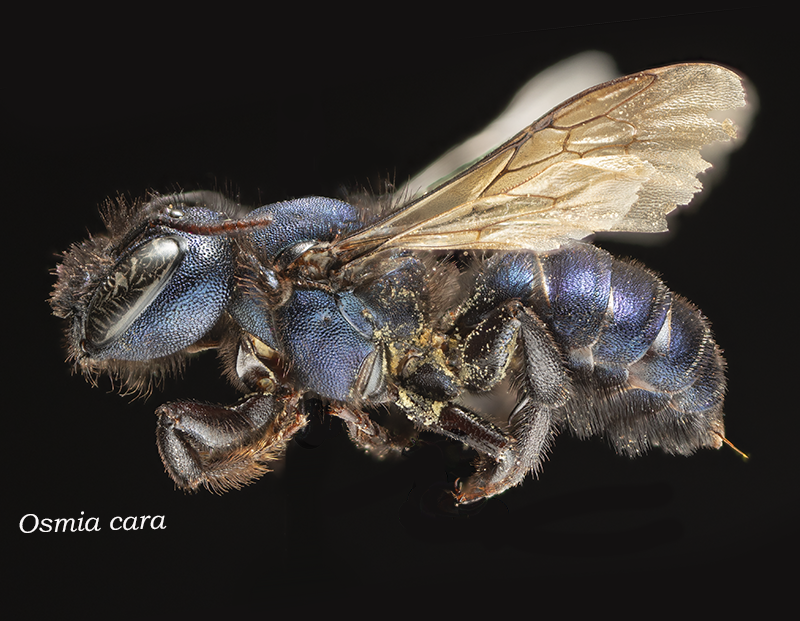
<style>
.page{position:relative;width:800px;height:621px;background:#131111}
.page>*{position:absolute;margin:0}
.t1{font:27px "BookmanOldStyle-Italic";color:#fcf9f9}
</style>
<div class="page">
<p class="t1" style="left:19px;top:511px;width:148px;height:22px;rotate:-2deg">Osmia cara</p>
</div>
